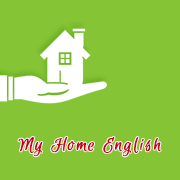
<style>
.page{position:relative;width:180px;height:180px;background:#85c434}
.page>*{position:absolute;margin:0}
.t1{font:20px "EuphoriaScript-Regular";letter-spacing:0.075em;color:#c90020;font-weight:bold}
</style>
<div class="page">
<p class="t1" style="left:18px;top:137px;width:143px;height:20px">My Home English</p>
</div>
